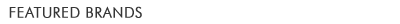
<style>
.page{position:relative;width:400px;height:24px;background:#ffffff}
.page>*{position:absolute;margin:0}
.t1{font:14.7px "FuturaBT-Light";letter-spacing:0.025em;color:#363636;text-transform:uppercase;font-weight:bold}
</style>
<div class="page">
<p class="t1" style="left:9px;top:6px;width:133px;height:12px">FEATURED BRANDS</p>
</div>
